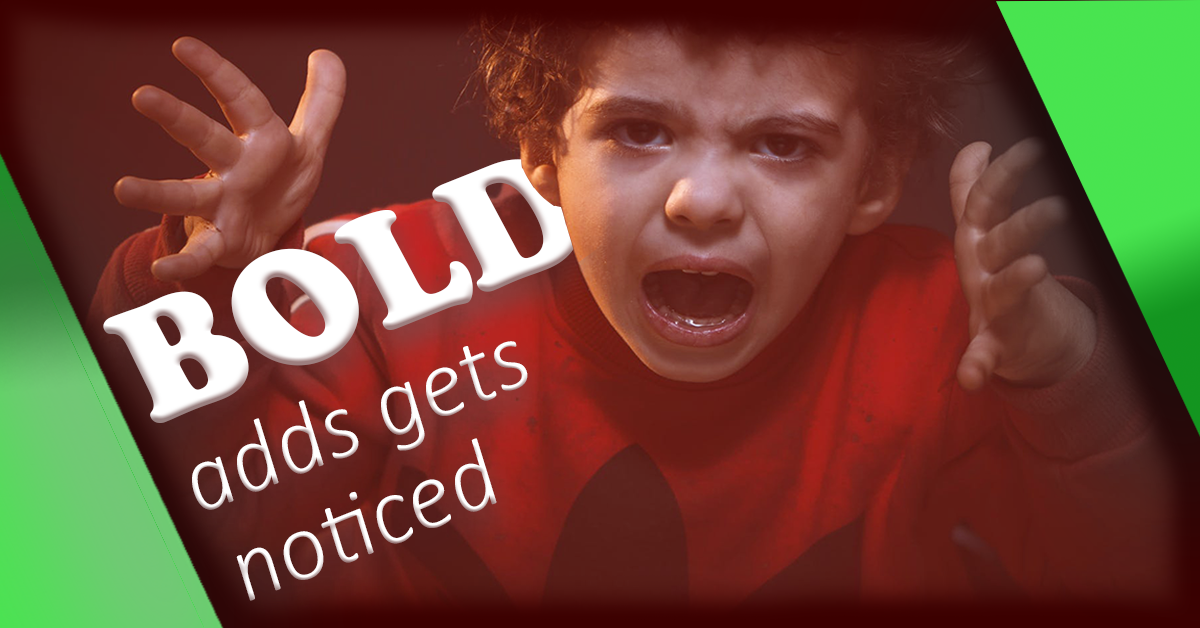
<style>
.page{position:relative;width:1200px;height:628px}
.page>*{position:absolute;margin:0}
.t1{font:100.2px/25px "Calibri-LightItalic";color:#ffffff;scale:0.95 1}
.t2{font:165.7px/50px "CooperBlackStd";color:#ffffff;scale:0.95 1}
</style>
<div class="page">
<p class="t1" style="left:103px;top:159px;width:478px;height:442px;rotate:-22deg"><span class="t2">BOLD <br><br><br></span>adds gets <br><br><br><br>noticed</p>
</div>
